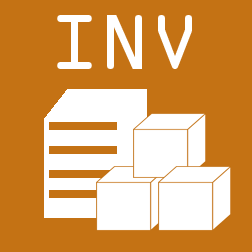
<style>
.page{position:relative;width:252px;height:252px;background:#c47214}
.page>*{position:absolute;margin:0}
.t1{font:70px "OCRAStd";color:#ffffff}
</style>
<div class="page">
<p class="t1" style="left:57px;top:15px;width:135px;height:54px">INV</p>
</div>
